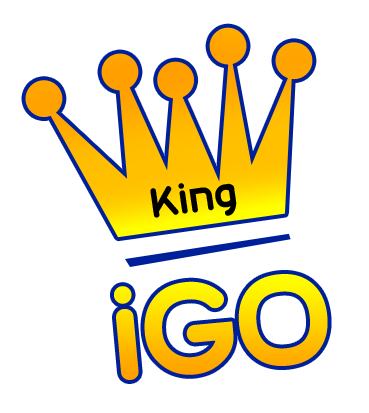
<style>
.page{position:relative;width:369px;height:413px;background:#ffffff}
.page>*{position:absolute;margin:0}
.t1{font:50px "20thCenturyFont";color:#000000}
.t2{font:154.2px "20thCenturyFont"}
</style>
<div class="page">
<p class="t1" style="left:150px;top:183px;width:87px;height:35px;rotate:-8deg">King</p>
<p class="t2" style="left:114px;top:274px;width:214px;height:106px;rotate:-5deg">iGO</p>
</div>
